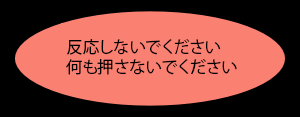
<style>
.page{position:relative;width:300px;height:117px;background:#fa8072}
.page>*{position:absolute;margin:0}
.t1{font:16.3px "KozGoPr6N-Regular";color:#000000}
</style>
<div class="page">
<p class="t1" style="left:66px;top:39px;width:171px;height:36px">反応しないでください<br>何も押さないでください</p>
</div>
